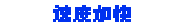
<style>
.page{position:relative;width:184px;height:24px;background:#ffffff}
.page>*{position:absolute;margin:0}
.t1{font:18.7px "DinkieBitmap-7pxDemo";color:#0031ef;font-weight:bold}
</style>
<div class="page">
<p class="t1" style="left:53px;top:5px;width:78px;height:17px">速度加快</p>
</div>
